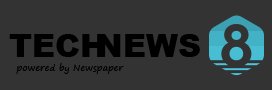
<style>
.page{position:relative;width:272px;height:90px;background:#333333}
.page>*{position:absolute;margin:0}
.t1{font:32px "Arial-Black";color:#000000}
.t2{font:9px "SegoePrint";color:#000000}
</style>
<div class="page">
<p class="t1" style="left:9px;top:34px;width:96px;height:23px">TECH</p>
<p class="t1" style="left:98px;top:34px;width:102px;height:23px">NEWS</p>
<p class="t2" style="left:16px;top:63px;width:108px;height:11px">powered by Newspaper</p>
</div>
